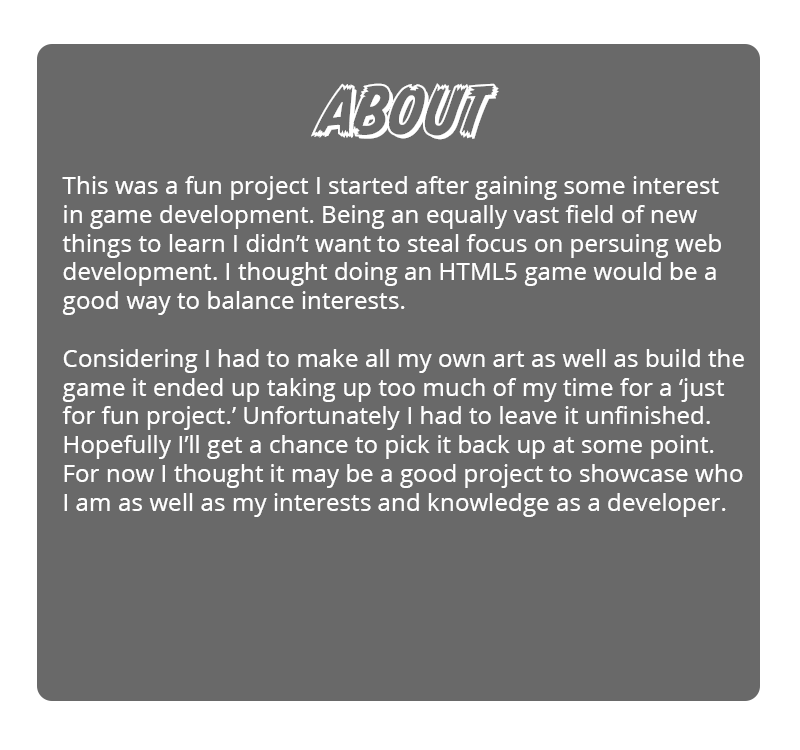
<style>
.page{position:relative;width:800px;height:750px;background:#696969}
.page>*{position:absolute;margin:0}
.t1{font:60px "CCMonsterMashOutline";letter-spacing:0.005em;color:#ffffff;text-transform:uppercase}
.t2{font:24px "OpenSans";letter-spacing:0.005em;color:#ffffff}
</style>
<div class="page">
<p class="t1" style="left:311px;top:83px;width:188px;height:57px">About</p>
<p class="t2" style="left:62px;top:176px;width:682px;height:341px">This was a fun project I started after gaining some interest<br>in game development. Being an equally vast field of new <br>things to learn I didn’t want to steal focus on persuing web<br>development. I thought doing an HTML5 game would be a <br>good way to balance interests.<br><br>Considering I had to make all my own art as well as build the<br>game it ended up taking up too much of my time for a ‘just<br>for fun project.’ Unfortunately I had to leave it unfinished. <br>Hopefully I’ll get a chance to pick it back up at some point. <br>For now I thought it may be a good project to showcase who <br>I am as well as my interests and knowledge as a developer.</p>
</div>
